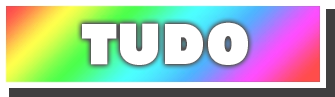
<style>
.page{position:relative;width:335px;height:97px}
.page>*{position:absolute;margin:0}
.t1{font:48px "RaglanPunchStd-UB";letter-spacing:0.045em;color:#ffffff}
</style>
<div class="page">
<p class="t1" style="left:82px;top:22px;width:166px;height:43px">TUDO</p>
</div>
